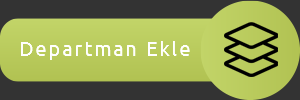
<style>
.page{position:relative;width:300px;height:100px;background:#333333}
.page>*{position:absolute;margin:0}
.t1{font:20px "Ubuntu";letter-spacing:0.1em;color:#ffffff}
</style>
<div class="page">
<p class="t1" style="left:21px;top:41px;width:169px;height:19px">Departman Ekle</p>
</div>
